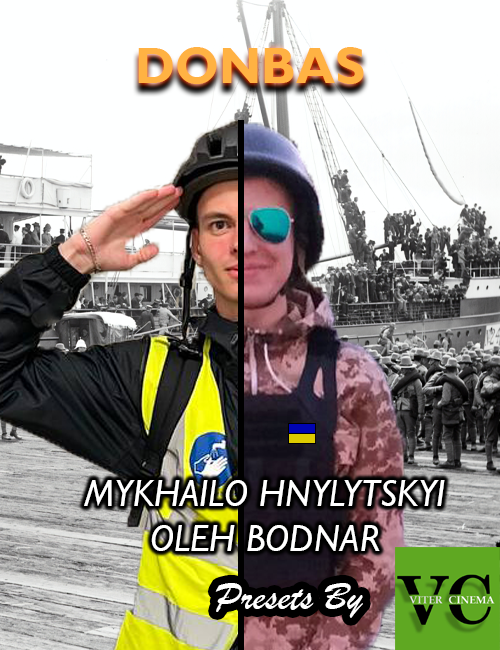
<style>
.page{position:relative;width:500px;height:650px}
.page>*{position:absolute;margin:0}
.t1{font:50px "GillSansMT-Bold";color:#ffb243}
.t2{font:37.4px "GillSansMT-Italic";color:#ffffff}
.t3{font:41.2px "BrushScriptMT";color:#ffffff}
</style>
<div class="page">
<p class="t1" style="left:138px;top:47px;width:226px;height:37px">DONBAS</p>
<p class="t2" style="left:84px;top:480px;width:361px;height:71px;text-align:center">MYKHAILO HNYLYTSKYI<br>OLEH BODNAR</p>
<p class="t3" style="left:215px;top:583px;width:148px;height:35px">Presets By</p>
</div>
